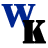
<style>
.page{position:relative;width:48px;height:48px;background:#ffffff}
.page>*{position:absolute;margin:0}
.t1{font:34px "STIXGeneral-Bold";letter-spacing:-0.14em;color:#00258f;font-weight:bold}
.t2{font:34px "Stencil";letter-spacing:-0.14em;color:#000000;font-weight:bold}
</style>
<div class="page">
<p class="t1" style="left:1px;top:4px;width:35px;height:24px">W</p>
<p class="t2" style="left:22px;top:20px;width:24px;height:24px">K</p>
</div>
